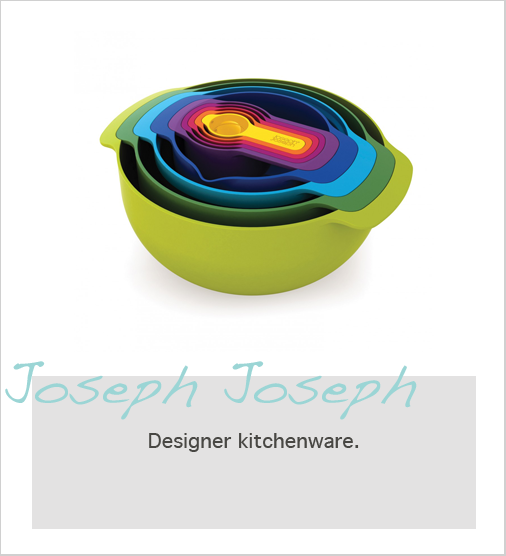
<style>
.page{position:relative;width:506px;height:556px;background:#ffffff}
.page>*{position:absolute;margin:0}
.t1{font:56px "Handwriting-Dakota";color:#9bd5d5}
.t2{font:20px "Geneva";color:#484743}
</style>
<div class="page">
<p class="t1" style="left:5px;top:361px;width:412px;height:59px">Joseph Joseph</p>
<p class="t2" style="left:149px;top:433px;width:210px;height:19px">Designer kitchenware.</p>
</div>
